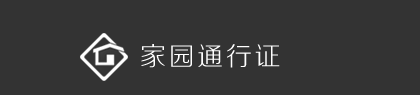
<style>
.page{position:relative;width:420px;height:95px;background:#333333}
.page>*{position:absolute;margin:0}
.t1{font:26px "FZZXHJW--GB1-0";letter-spacing:0.1em;color:#ffffff}
</style>
<div class="page">
<p class="t1" style="left:141px;top:44px;width:139px;height:24px">家园通行证</p>
</div>
